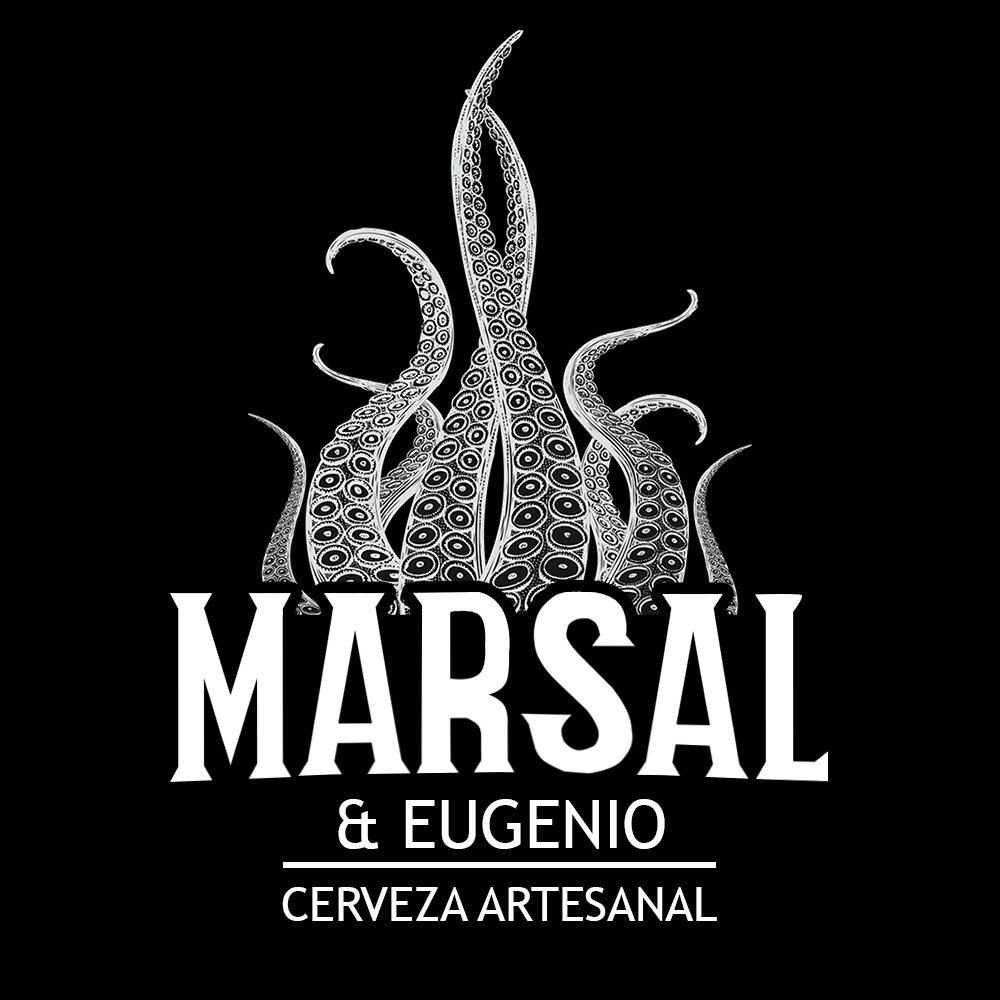
<style>
.page{position:relative;width:1000px;height:1000px;background:#000000}
.page>*{position:absolute;margin:0}
.t1{font:67px "TrebuchetMS";color:#ffffff}
.t2{font:48.2px "TrebuchetMS";color:#ffffff}
</style>
<div class="page">
<p class="t1" style="left:338px;top:799px;width:327px;height:50px">&amp; EUGENIO</p>
<p class="t2" style="left:282px;top:887px;width:435px;height:34px">CERVEZA ARTESANAL</p>
</div>
